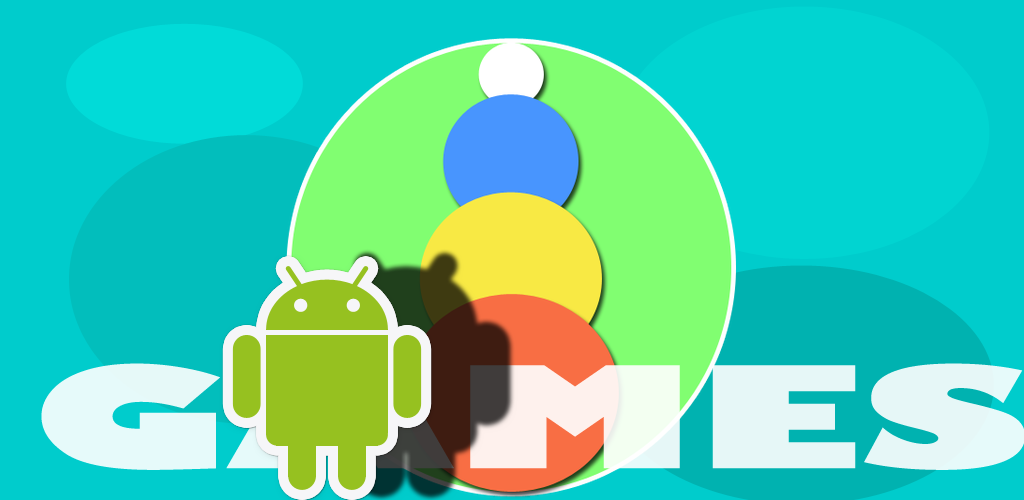
<style>
.page{position:relative;width:1024px;height:500px;background:#00cccc}
.page>*{position:absolute;margin:0}
.t1{font:138px "GillSans-UltraBold";scale:1.67 1}
</style>
<div class="page">
<p class="t1" style="left:41px;top:363px;width:984px;height:107px">GAMES</p>
</div>
